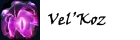
<style>
.page{position:relative;width:140px;height:40px;background:#ffffff}
.page>*{position:absolute;margin:0}
.t1{font:16px "VinerHandITC";color:#000000}
</style>
<div class="page">
<p class="t1" style="left:48px;top:11px;width:58px;height:15px">Vel’Koz</p>
</div>
